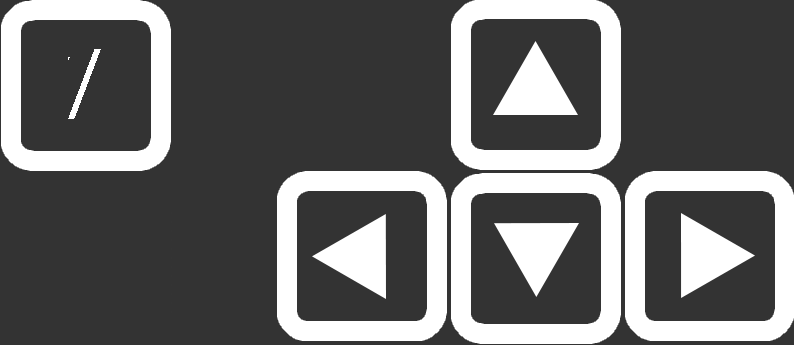
<style>
.page{position:relative;width:794px;height:345px;background:#333333}
.page>*{position:absolute;margin:0}
.t1{font:96px "MyriadPro-Regular";color:#ffffff}
</style>
<div class="page">
<p class="t1" style="left:68px;top:49px;width:33px;height:70px">/</p>
</div>
